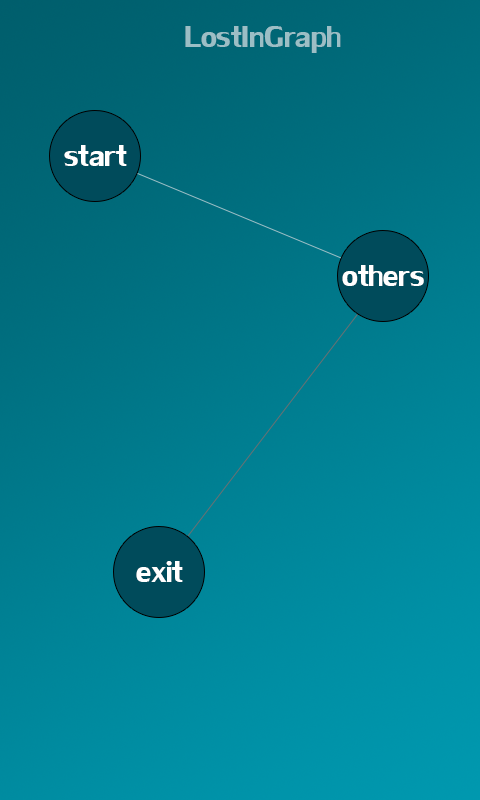
<style>
.page{position:relative;width:480px;height:800px}
.page>*{position:absolute;margin:0}
.t1{font:46px "LilyUPC";color:#9cbec5}
.t2{font:46px "LilyUPC";color:#ffffff}
</style>
<div class="page">
<p class="t1" style="left:185px;top:26px;width:156px;height:27px">LostInGraph</p>
<p class="t2" style="left:64px;top:145px;width:63px;height:21px">start</p>
<p class="t2" style="left:342px;top:265px;width:82px;height:21px">others</p>
<p class="t2" style="left:136px;top:561px;width:47px;height:21px">exit</p>
</div>
